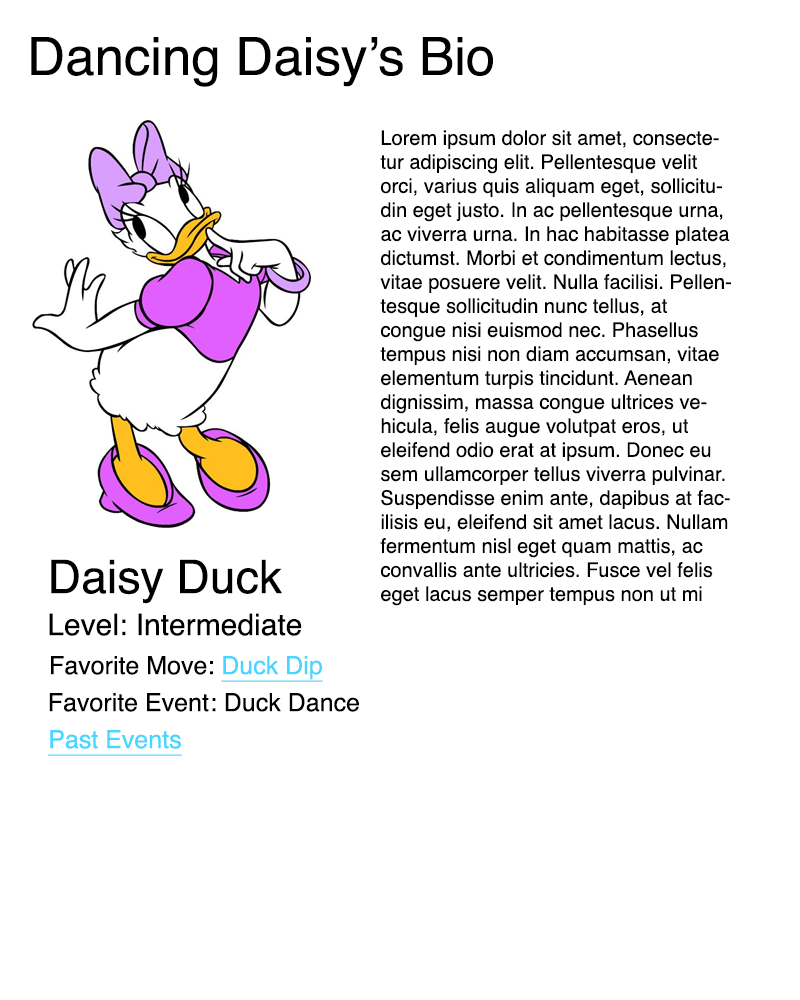
<style>
.page{position:relative;width:800px;height:1000px;background:#ffffff}
.page>*{position:absolute;margin:0}
.t1{font:52.7px "Helvetica";color:#000000}
.t2{font:20px "Helvetica";color:#000000}
.t3{font:46.3px "Helvetica";color:#000000}
.t4{font:30px "Helvetica";color:#000000}
.t5{font:25px "Helvetica";color:#000000}
.t6{font:25px "Helvetica";color:#47d6ff;text-decoration:underline}
</style>
<div class="page">
<p class="t1" style="left:31px;top:37px;width:462px;height:50px">Dancing Daisy’s Bio</p>
<p class="t2" style="left:380px;top:130px;width:351px;height:476px">Lorem ipsum dolor sit amet, consectetur adipiscing elit. Pellentesque velit orci, varius quis aliquam eget, sollicitudin eget justo. In ac pellentesque urna, ac viverra urna. In hac habitasse platea dictumst. Morbi et condimentum lectus, vitae posuere velit. Nulla facilisi. Pellentesque sollicitudin nunc tellus, at congue nisi euismod nec. Phasellus tempus nisi non diam accumsan, vitae elementum turpis tincidunt. Aenean dignissim, massa congue ultrices vehicula, felis augue volutpat eros, ut eleifend odio erat at ipsum. Donec eu sem ullamcorper tellus viverra pulvinar. Suspendisse enim ante, dapibus at facilisis eu, eleifend sit amet lacus. Nullam fermentum nisl eget quam mattis, ac convallis ante ultricies. Fusce vel felis eget lacus semper tempus non ut mi</p>
<p class="t3" style="left:51px;top:559px;width:231px;height:45px">Daisy Duck</p>
<p class="t4" style="left:49px;top:613px;width:253px;height:23px">Level: Intermediate</p>
<p class="t5" style="left:51px;top:656px;width:272px;height:26px">Favorite Move: <span class="t6">Duck Dip</span></p>
<p class="t5" style="left:49px;top:693px;width:310px;height:19px">Favorite Event: Duck Dance</p>
<p class="t6" style="left:48px;top:730px;width:134px;height:26px">Past Events</p>
</div>
